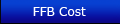
<style>
.page{position:relative;width:120px;height:24px}
.page>*{position:absolute;margin:0}
.t1{font:12px "Verdana";color:#ffffff}
</style>
<div class="page">
<p class="t1" style="left:33px;top:7px;width:53px;height:9px">FFB Cost</p>
</div>
